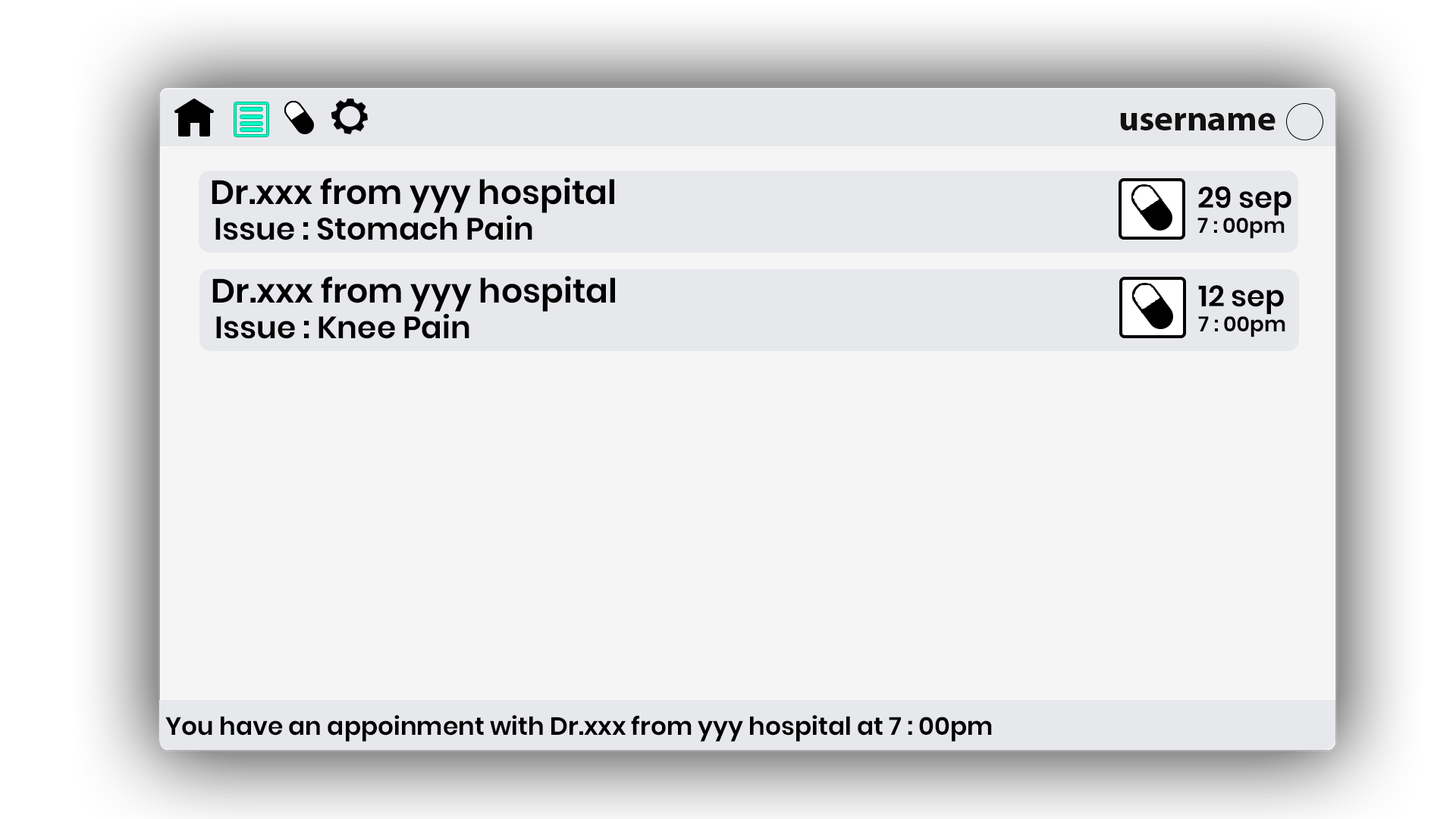
<style>
.page{position:relative;width:1456px;height:819px;background:#f5f5f5}
.page>*{position:absolute;margin:0}
.t1{font:35.6px "MyriadPro-Bold";color:#12110f}
.t2{font:33.5px "Poppins-SemiBold";color:#000000}
.t3{font:29.3px "Poppins-SemiBold";color:#000000}
.t4{font:30.9px "Poppins-SemiBold";color:#000000}
.t5{font:21px "Poppins-SemiBold";color:#000000}
.t6{font:24.9px "Poppins-SemiBold";color:#000000}
</style>
<div class="page">
<p class="t1" style="left:1120px;top:113px;width:155px;height:17px">username</p>
<p class="t2" style="left:212px;top:177px;width:402px;height:36px">Dr.xxx from yyy hospital</p>
<p class="t3" style="left:1198px;top:186px;width:93px;height:30px">29 sep</p>
<p class="t4" style="left:215px;top:215px;width:317px;height:25px">Issue : Stomach Pain</p>
<p class="t5" style="left:1197px;top:218px;width:88px;height:21px">7 : 00pm</p>
<p class="t2" style="left:212px;top:276px;width:403px;height:36px">Dr.xxx from yyy hospital</p>
<p class="t3" style="left:1198px;top:285px;width:86px;height:30px">12 sep</p>
<p class="t4" style="left:216px;top:313px;width:253px;height:26px">Issue : Knee Pain</p>
<p class="t5" style="left:1198px;top:316px;width:87px;height:21px">7 : 00pm</p>
<p class="t6" style="left:165px;top:715px;width:827px;height:27px">You have an appoinment with Dr.xxx from yyy hospital at 7 : 00pm</p>
</div>
